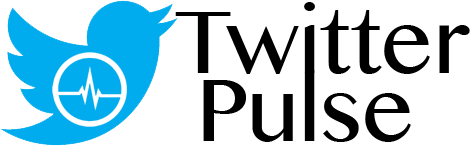
<style>
.page{position:relative;width:470px;height:146px;background:#ffffff}
.page>*{position:absolute;margin:0}
.t1{font:90px "MalayalamMN";color:#000000}
</style>
<div class="page">
<p class="t1" style="left:175px;top:2px;width:295px;height:72px">Twitter</p>
<p class="t1" style="left:203px;top:70px;width:208px;height:72px">Pulse</p>
</div>
